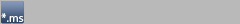
<style>
.page{position:relative;width:240px;height:24px;background:#b9b9b9}
.page>*{position:absolute;margin:0}
.t1{font:12px "MyriadPro-Regular";color:#ffffff}
</style>
<div class="page">
<p class="t1" style="left:1px;top:13px;width:23px;height:9px">*.ms</p>
</div>
